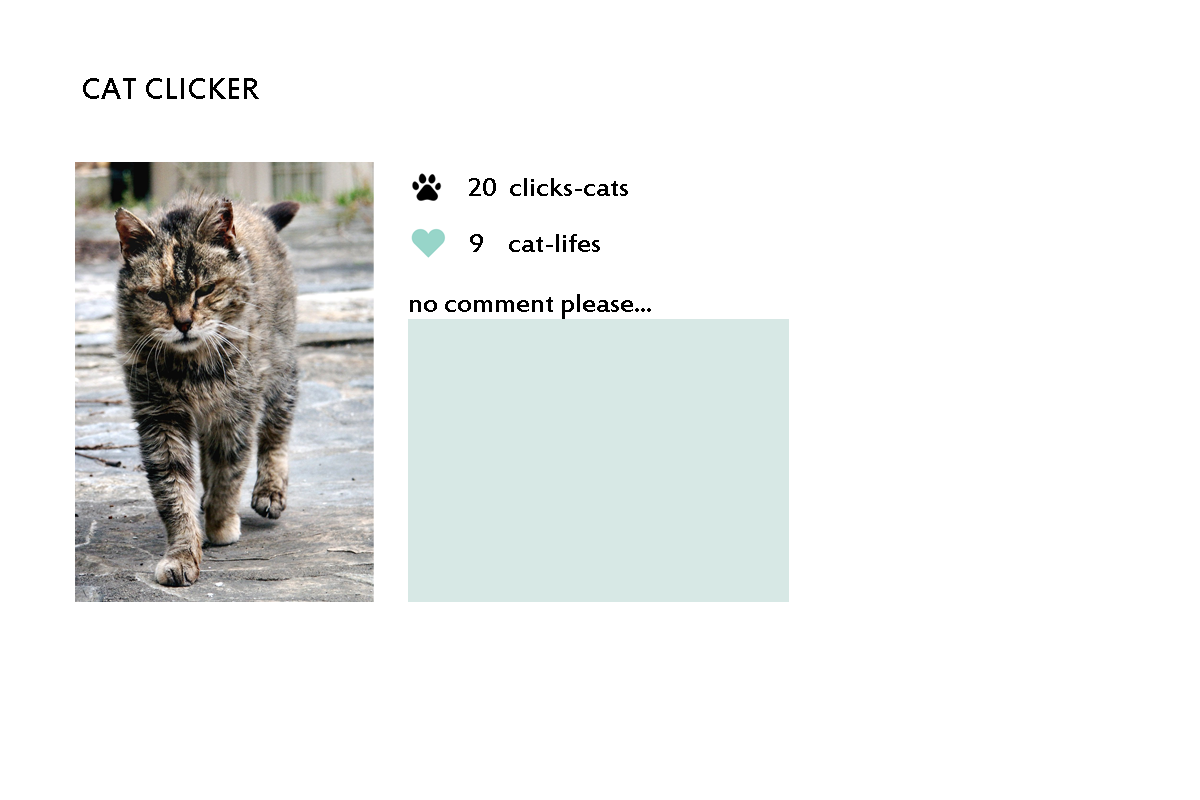
<style>
.page{position:relative;width:1200px;height:800px;background:#ffffff}
.page>*{position:absolute;margin:0}
.t1{font:33.3px "EstrangeloEdessa";color:#000000}
.t2{font:29.2px "EstrangeloEdessa";color:#000000}
</style>
<div class="page">
<p class="t1" style="left:83px;top:78px;width:176px;height:21px">CAT CLICKER</p>
<p class="t2" style="left:469px;top:178px;width:159px;height:18px">20  clicks-cats</p>
<p class="t2" style="left:470px;top:234px;width:130px;height:18px">9    cat-lifes</p>
<p class="t2" style="left:410px;top:294px;width:241px;height:25px">no comment please...</p>
</div>
